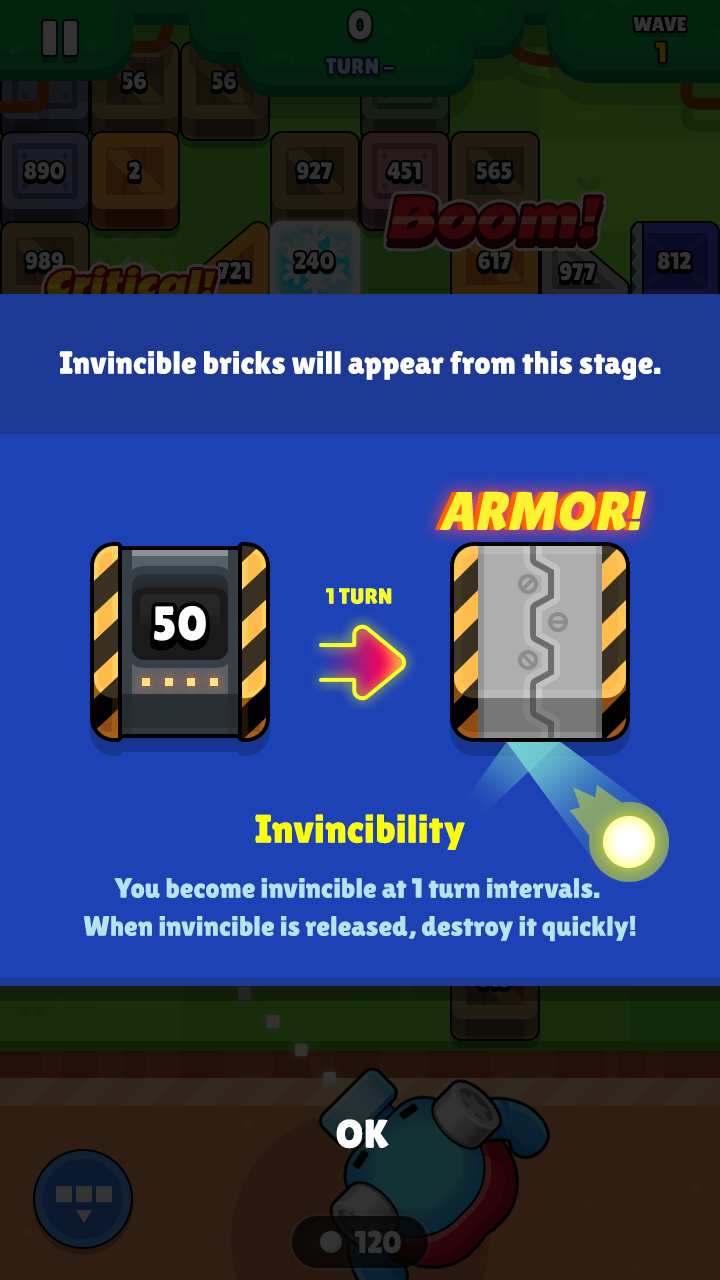
<style>
.page{position:relative;width:720px;height:1280px;background:#1d42b6}
.page>*{position:absolute;margin:0}
.t1{font:32px "LilitaOne";color:#ffffff}
.t2{font:54.4px "LilitaOne";text-transform:uppercase;font-style:italic}
.t3{font:54.4px "LilitaOne";color:#fdf331;text-transform:uppercase;font-style:italic}
.t4{font:22px "LilitaOne";color:#f5ff25;text-transform:uppercase}
.t5{font:48px "LilitaOne";letter-spacing:0.02em;color:#ffffff}
.t6{font:40px "LilitaOne";color:#fcff00}
.t7{font:28px/38px "LilitaOne";color:#b6e3ee}
.t8{font:40px "LilitaOne";color:#ffffff}
</style>
<div class="page">
<p class="t1" style="left:59px;top:351px;width:602px;height:29px">Invincible bricks will appear from this stage.</p>
<p class="t2" style="left:435px;top:491px;width:206px;height:40px">ARMOR!</p>
<p class="t3" style="left:440px;top:491px;width:206px;height:40px">ARMOR!</p>
<p class="t4" style="left:326px;top:588px;width:66px;height:16px">1 Turn</p>
<p class="t5" style="left:154px;top:606px;width:52px;height:35px">50</p>
<p class="t6" style="left:255px;top:814px;width:210px;height:36px">Invincibility</p>
<p class="t7" style="left:83px;top:878px;width:553px;height:64px;text-align:center">You become invincible at 1 turn intervals. <br>When invincible is released, destroy it quickly!</p>
<p class="t8" style="left:336px;top:1119px;width:53px;height:30px">OK</p>
</div>
